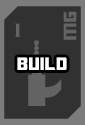
<style>
.page{position:relative;width:85px;height:125px;background:#313131}
.page>*{position:absolute;margin:0}
.t1{font:20px "TransformersMovie";letter-spacing:0.04em;color:#ffffff}
</style>
<div class="page">
<p class="t1" style="left:17px;top:57px;width:50px;height:13px">BUILD</p>
</div>
